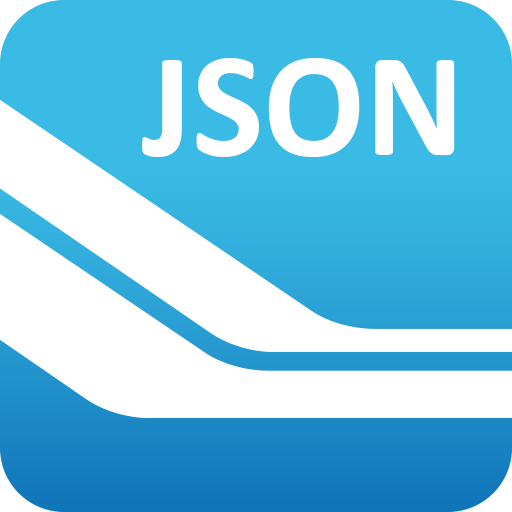
<style>
.page{position:relative;width:512px;height:512px;background:#ffffff}
.page>*{position:absolute;margin:0}
.t1{font:150.6px "Calibri-Bold";color:#ffffff}
</style>
<div class="page">
<p class="t1" style="left:142px;top:58px;width:313px;height:99px">JSON</p>
</div>
